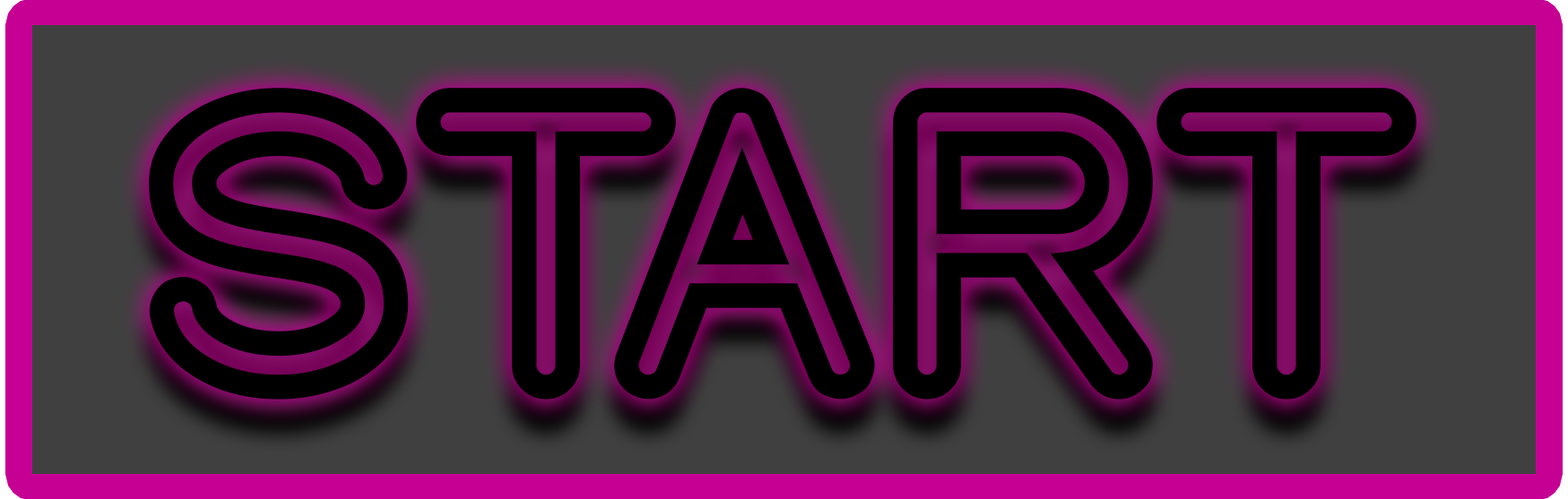
<style>
.page{position:relative;width:1568px;height:499px;background:#404040}
.page>*{position:absolute;margin:0}
.t1{font:412.8px "NEONGLOW-Bold";color:#000000}
</style>
<div class="page">
<p class="t1" style="left:149px;top:88px;width:1267px;height:312px">START</p>
</div>
